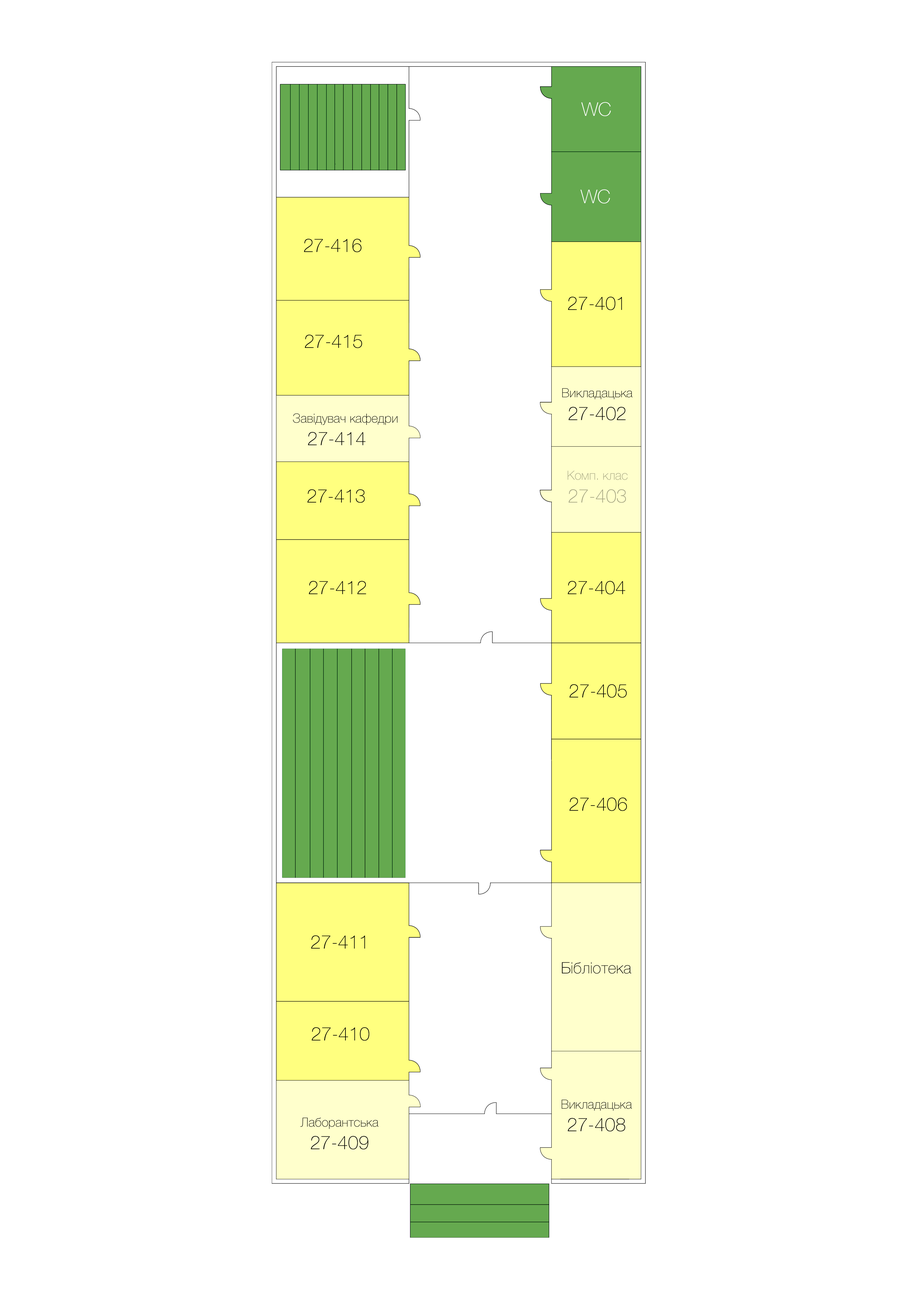
<style>
.page{position:relative;width:918px;height:1299px;background:#ffffff}
.page>*{position:absolute;margin:0}
.t1{font:18.8px "HelveticaNeue-Thin";color:#ffffff}
.t2{font:18.8px "HelveticaNeue-Thin";color:#000000}
.t3{font:12.6px "HelveticaNeue-Thin";color:#000000}
.t4{font:12.6px "HelveticaNeue-Thin";color:#a3a381}
.t5{font:18.8px "HelveticaNeue-Thin";color:#a3a381}
.t6{font:15.7px "HelveticaNeue-Thin";color:#000000}
</style>
<div class="page">
<p class="t1" style="left:581px;top:102px;width:30px;height:14px">WC</p>
<p class="t1" style="left:580px;top:189px;width:30px;height:14px">WC</p>
<p class="t2" style="left:304px;top:239px;width:58px;height:13px">27-416</p>
<p class="t2" style="left:568px;top:297px;width:54px;height:13px">27-401</p>
<p class="t2" style="left:305px;top:334px;width:57px;height:14px">27-415</p>
<p class="t3" style="left:562px;top:388px;width:70px;height:32px;text-align:center">Викладацька<br><span class="t2">27-402</span></p>
<p class="t3" style="left:293px;top:413px;width:105px;height:32px;text-align:center">Завідувач кафедри<br><span class="t2">27-414</span></p>
<p class="t4" style="left:567px;top:471px;width:61px;height:32px;text-align:center">Комп. клас<br><span class="t5">27-403</span></p>
<p class="t2" style="left:307px;top:489px;width:58px;height:14px">27-413</p>
<p class="t2" style="left:309px;top:581px;width:57px;height:13px">27-412</p>
<p class="t2" style="left:568px;top:581px;width:57px;height:13px">27-404</p>
<p class="t2" style="left:569px;top:684px;width:58px;height:14px">27-405</p>
<p class="t2" style="left:569px;top:797px;width:58px;height:14px">27-406</p>
<p class="t2" style="left:311px;top:935px;width:54px;height:14px">27-411</p>
<p class="t6" style="left:562px;top:962px;width:69px;height:12px">Бібліотека</p>
<p class="t2" style="left:312px;top:1027px;width:57px;height:14px">27-410</p>
<p class="t3" style="left:561px;top:1100px;width:71px;height:32px;text-align:center">Викладацька<br><span class="t2">27-408</span></p>
<p class="t3" style="left:300px;top:1118px;width:78px;height:32px;text-align:center">Лаборантська<br><span class="t2">27-409</span></p>
</div>
